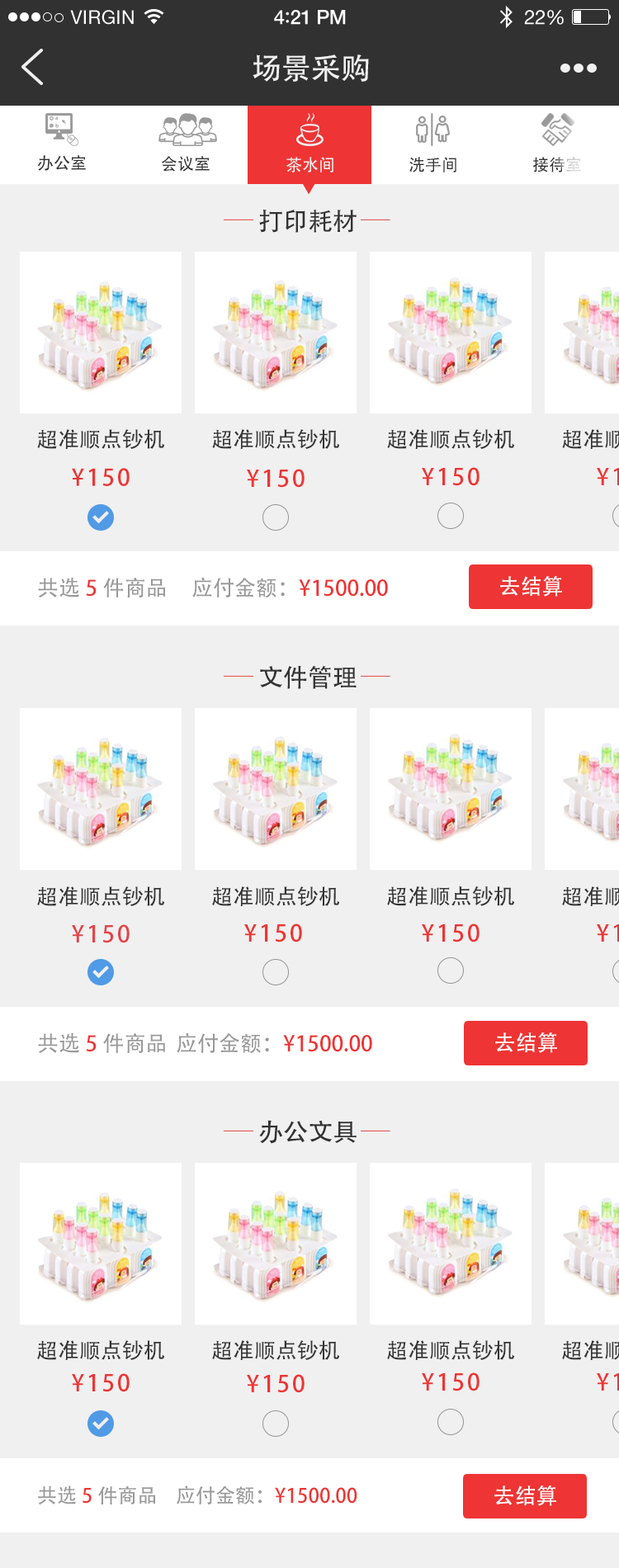
<style>
.page{position:relative;width:619px;height:1568px;background:#f0f0f0}
.page>*{position:absolute;margin:0}
.t1{font:29.7px "AdobeHeitiStd-Regular";color:#f0f0f0}
.t2{font:16.5px "AdobeHeitiStd-Regular";color:#333333}
.t3{font:16.5px "AdobeHeitiStd-Regular";color:#f0f0f0}
.t4{font:16.5px "AdobeHeitiStd-Regular"}
.t5{font:24.8px "AdobeHeitiStd-Regular";color:#323232}
.t6{font:21.5px "AdobeHeitiStd-Regular";color:#333333}
.t7{font:23.1px "AdobeHeitiStd-Regular";letter-spacing:0.1em;color:#ee3434}
.t8{font:21.5px "AdobeHeitiStd-Regular";color:#999999}
.t9{font:21.5px "AdobeHeitiStd-Regular";color:#ee3434}
.t10{font:21.5px "AdobeHeitiStd-Regular";color:#ffffff}
.t11{font:23.1px "AdobeHeitiStd-Regular";letter-spacing:0.1em;color:#e34449}
.t12{font:19.8px "AdobeHeitiStd-Regular";color:#999999}
.t13{font:19.8px "AdobeHeitiStd-Regular";color:#ee3434}
</style>
<div class="page">
<p class="t1" style="left:253px;top:54px;width:116px;height:28px">场景采购</p>
<p class="t2" style="left:37px;top:155px;width:49px;height:16px">办公室</p>
<p class="t2" style="left:161px;top:156px;width:49px;height:16px">会议室</p>
<p class="t3" style="left:286px;top:157px;width:47px;height:15px">茶水间</p>
<p class="t2" style="left:409px;top:157px;width:47px;height:15px">洗手间</p>
<p class="t4" style="left:533px;top:157px;width:48px;height:15px">接待室</p>
<p class="t5" style="left:259px;top:210px;width:98px;height:23px">打印耗材</p>
<p class="t6" style="left:37px;top:429px;width:128px;height:20px">超准顺点钞机</p>
<p class="t6" style="left:212px;top:429px;width:128px;height:20px">超准顺点钞机</p>
<p class="t6" style="left:387px;top:429px;width:128px;height:20px">超准顺点钞机</p>
<p class="t7" style="left:72px;top:468px;width:58px;height:18px">¥150</p>
<p class="t7" style="left:247px;top:469px;width:58px;height:19px">¥150</p>
<p class="t7" style="left:422px;top:467px;width:57px;height:19px">¥150</p>
<p class="t8" style="left:38px;top:578px;width:128px;height:19px">共选<span class="t9">5</span>件商品</p>
<p class="t9" style="left:192px;top:577px;width:196px;height:20px"><span class="t8">应付金额：</span>¥1500.00</p>
<p class="t10" style="left:500px;top:576px;width:62px;height:21px">去结算</p>
<p class="t5" style="left:260px;top:665px;width:97px;height:24px">文件管理</p>
<p class="t6" style="left:37px;top:886px;width:128px;height:20px">超准顺点钞机</p>
<p class="t6" style="left:212px;top:886px;width:128px;height:20px">超准顺点钞机</p>
<p class="t6" style="left:387px;top:886px;width:128px;height:20px">超准顺点钞机</p>
<p class="t11" style="left:72px;top:924px;width:58px;height:19px">¥150</p>
<p class="t7" style="left:244px;top:923px;width:58px;height:19px">¥150</p>
<p class="t7" style="left:422px;top:923px;width:57px;height:19px">¥150</p>
<p class="t8" style="left:38px;top:1033px;width:127px;height:20px">共选<span class="t9">5</span>件商品</p>
<p class="t9" style="left:177px;top:1032px;width:195px;height:21px"><span class="t8">应付金额：</span>¥1500.00</p>
<p class="t10" style="left:495px;top:1032px;width:62px;height:21px">去结算</p>
<p class="t5" style="left:259px;top:1120px;width:98px;height:24px">办公文具</p>
<p class="t6" style="left:37px;top:1340px;width:128px;height:20px">超准顺点钞机</p>
<p class="t6" style="left:212px;top:1340px;width:128px;height:20px">超准顺点钞机</p>
<p class="t6" style="left:387px;top:1340px;width:128px;height:20px">超准顺点钞机</p>
<p class="t7" style="left:72px;top:1373px;width:58px;height:19px">¥150</p>
<p class="t7" style="left:422px;top:1372px;width:57px;height:19px">¥150</p>
<p class="t7" style="left:247px;top:1374px;width:58px;height:19px">¥150</p>
<p class="t12" style="left:38px;top:1485px;width:118px;height:20px">共选<span class="t13">5</span>件商品</p>
<p class="t13" style="left:177px;top:1485px;width:180px;height:19px"><span class="t12">应付金额：</span>¥1500.00</p>
<p class="t10" style="left:494px;top:1485px;width:62px;height:21px">去结算</p>
</div>
